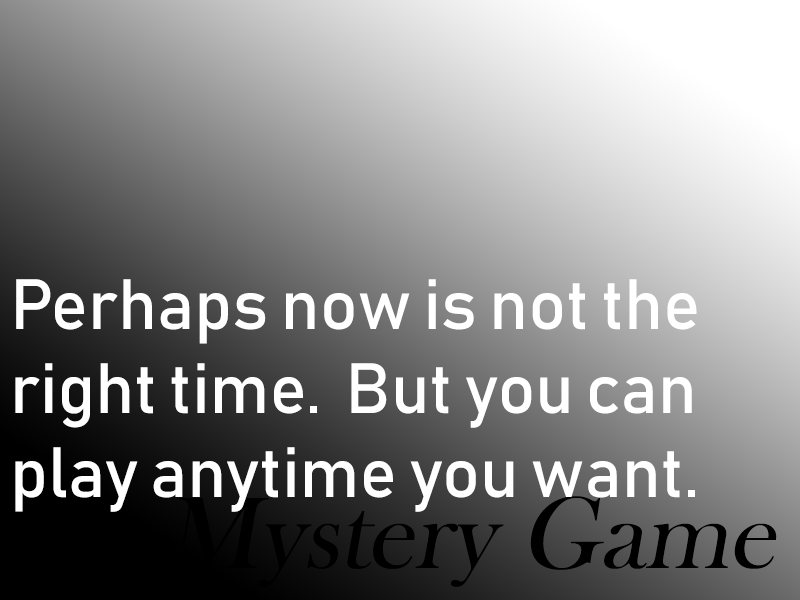
<style>
.page{position:relative;width:800px;height:600px}
.page>*{position:absolute;margin:0}
.t1{font:70px "Bahnschrift";color:#ffffff;font-style:italic}
.t2{font:105px "BaskOldFace";color:#000000;font-style:italic}
</style>
<div class="page">
<p class="t1" style="left:15px;top:279px;width:682px;height:233px">Perhaps now is not the<br>right time.  But you can<br>play anytime you want.</p>
<p class="t2" style="left:65px;top:496px;width:712px;height:91px">A Mystery Game</p>
</div>
